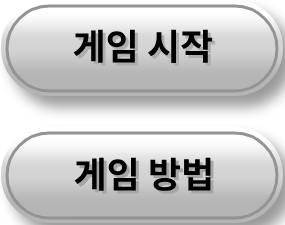
<style>
.page{position:relative;width:285px;height:225px}
.page>*{position:absolute;margin:0}
.t1{font:36px "NotoSansKR-Bold";color:#000000}
</style>
<div class="page">
<p class="t1" style="left:73px;top:29px;width:140px;height:34px">게임 시작</p>
<p class="t1" style="left:74px;top:157px;width:137px;height:34px">게임 방법</p>
</div>
